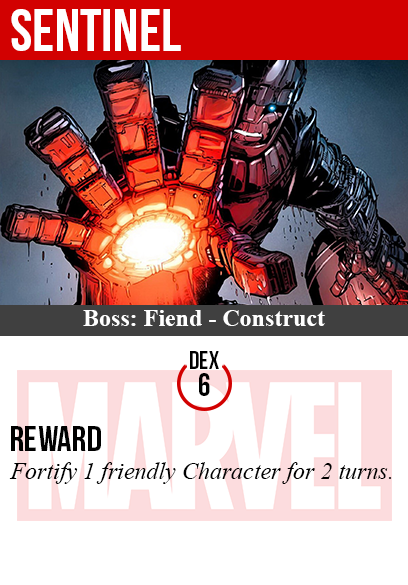
<style>
.page{position:relative;width:408px;height:585px;background:#ffffff}
.page>*{position:absolute;margin:0}
.t1{font:60px "BebasNeue";color:#ffffff}
.t2{font:24px "TimesNewRomanPS-BoldMT";color:#ffffff}
.t3{font:25px "BebasNeue";color:#000000}
.t4{font:32px "BebasNeue";color:#000000}
.t5{font:36px "BebasNeue";color:#000000}
.t6{font:24px "TimesNewRomanPS-ItalicMT";color:#000000}
</style>
<div class="page">
<p class="t1" style="left:11px;top:9px;width:170px;height:42px">sentinel</p>
<p class="t2" style="left:83px;top:310px;width:242px;height:16px">Boss: Fiend - Construct</p>
<p class="t3" style="left:190px;top:351px;width:29px;height:18px">dex</p>
<p class="t4" style="left:199px;top:373px;width:11px;height:23px">6</p>
<p class="t5" style="left:11px;top:426px;width:90px;height:25px">reward</p>
<p class="t6" style="left:9px;top:462px;width:383px;height:22px">Fortify 1 friendly Character for 2 turns.</p>
</div>
